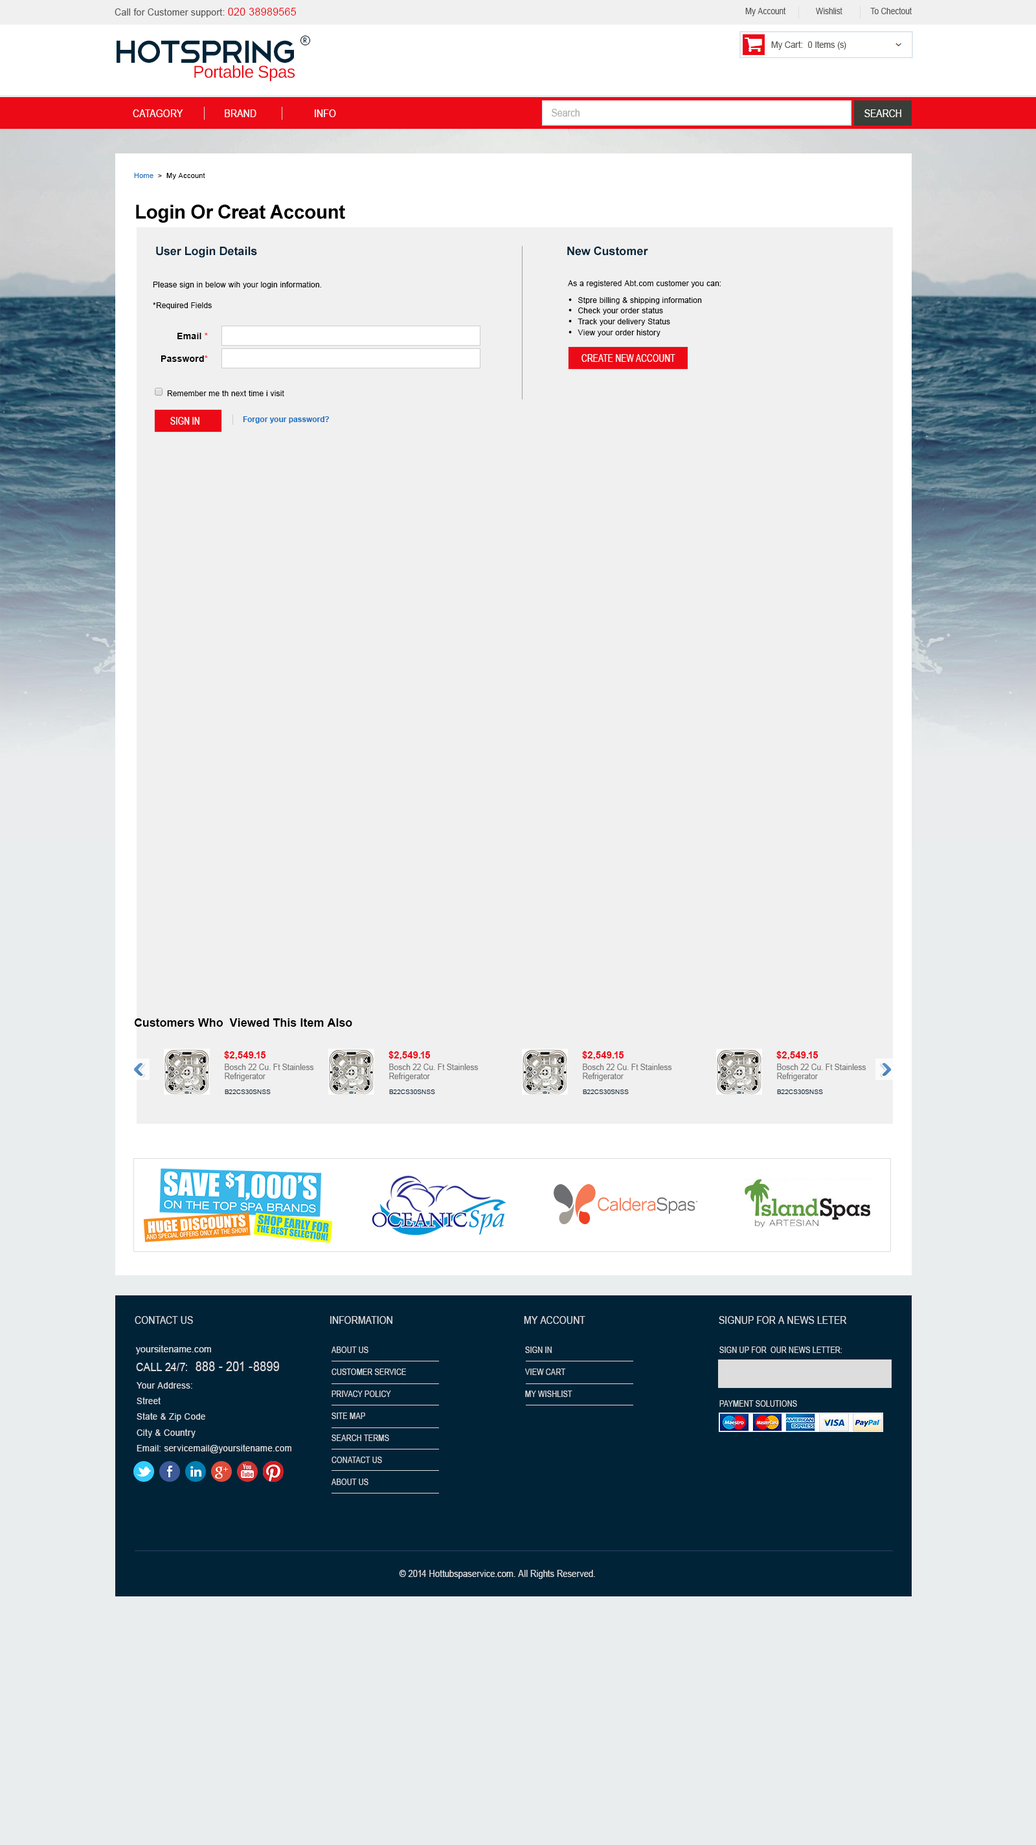
<style>
.page{position:relative;width:1036px;height:1845px;background:#f0f0f0}
.page>*{position:absolute;margin:0}
.t1{font:9.5px "ArialMT";letter-spacing:0.02em;color:#555555;scale:0.95 1}
.t2{font:10.9px "ArialMT";letter-spacing:0.02em;color:#ec0a17;scale:0.95 1}
.t3{font:8.9px "ArialMT";color:#555555;scale:0.87 1}
.t4{font:41.5px "Telegrafico";letter-spacing:-0.08em;color:#012338}
.t5{font:6.8px "HarmoniaSansStd-Regular";letter-spacing:0.03em;color:#012338}
.t6{font:8.8px "ArialMT";color:#555555;scale:0.95 1}
.t7{font:17.1px "LiberationSans";letter-spacing:-0.02em;color:#ec0a17}
.t8{font:10.4px "ArialMT";letter-spacing:0.01em;color:#ffffff;scale:0.87 1}
.t9{font:10.4px "ArialMT";color:#aeaba9;scale:0.87 1}
.t10{font:10.4px "ArialMT";color:#ffffff;scale:0.87 1}
.t11{font:7.1px "ArialMT";letter-spacing:0.02em;color:#000000}
.t12{font:7.1px "ArialMT";letter-spacing:0.02em;color:#1d70c0}
.t13{font:19.4px "Arial-BoldMT";letter-spacing:-0.02em;color:#000000}
.t14{font:11.7px "Arial-BoldMT";color:#012338}
.t15{font:7.8px "ArialMT";letter-spacing:0.02em;color:#000000}
.t16{font:9.7px "ArialMT";letter-spacing:0.02em;color:#000000}
.t17{font:9.1px "Arial-BoldMT";letter-spacing:0.02em;color:#000000}
.t18{font:9.1px "Arial-BoldMT";letter-spacing:0.02em;color:#f92834}
.t19{font:10.7px "ArialMT";color:#ffffff;text-transform:uppercase;scale:0.75 1}
.t20{font:7.8px "Arial-BoldMT"}
.t21{font:7.8px "Arial-BoldMT";color:#1d70c0}
.t22{font:11.7px "Arial-BoldMT";color:#000000}
.t23{font:9.7px "Arial-BoldMT";color:#ec0a17}
.t24{font:8.5px/9.1px "ArialMT";color:#777777;scale:0.91 1}
.t25{font:6.5px "ArialMT";color:#012338}
.t26{font:10.4px "ArialMT";letter-spacing:0.01em;color:#dddddd;scale:0.87 1}
.t27{font:9.9px "ArialMT";letter-spacing:0.03em;color:#dddddd;scale:0.9 1}
.t28{font:8.2px/22px "ArialMT";letter-spacing:0.01em;color:#dddddd;scale:0.87 1}
.t29{font:8.2px "ArialMT";letter-spacing:0.01em;color:#dddddd;scale:0.87 1}
.t30{font:13.4px "ArialMT";letter-spacing:0.01em;color:#dddddd;scale:0.87 1}
.t31{font:11.9px "ArialMT";letter-spacing:0.01em;color:#dddddd;scale:0.87 1}
.t32{font:9.1px/15.6px "ArialMT";letter-spacing:0.03em;color:#dddddd;scale:0.94 1}
.t33{font:9.7px "ArialMT";letter-spacing:0.01em;color:#dddddd;scale:0.87 1}
</style>
<div class="page">
<p class="t1" style="left:115px;top:8px;width:182px;height:9px">Call for Customer support: <span class="t2">020 38989565</span></p>
<p class="t3" style="left:745px;top:7px;width:167px;height:9px">My Account              Wishlist             To Chectout</p>
<p class="t4" style="left:117px;top:40px;width:177px;height:23px">HotSpring</p>
<p class="t5" style="left:303px;top:38px;width:4px;height:5px">R</p>
<p class="t6" style="left:771px;top:41px;width:75px;height:9px">My Cart:  0 Items (s)</p>
<p class="t7" style="left:194px;top:65px;width:101px;height:17px">Portable Spas</p>
<p class="t8" style="left:133px;top:109px;width:203px;height:8px">CATAGORY                BRAND                      INFO</p>
<p class="t9" style="left:552px;top:109px;width:27px;height:8px">Search</p>
<p class="t10" style="left:864px;top:109px;width:37px;height:8px">SEARCH</p>
<p class="t11" style="left:134px;top:173px;width:71px;height:6px"><span class="t12">Home </span> &gt;  My Account</p>
<p class="t13" style="left:136px;top:205px;width:209px;height:18px">Login Or Creat Account</p>
<p class="t14" style="left:156px;top:247px;width:101px;height:11px">User Login Details</p>
<p class="t14" style="left:567px;top:246px;width:81px;height:10px">New Customer</p>
<p class="t15" style="left:153px;top:282px;width:169px;height:7px">Please sign in below wih your login information.</p>
<p class="t15" style="left:568px;top:280px;width:153px;height:7px">As a registered Abt.com customer you can:</p>
<p class="t15" style="left:153px;top:302px;width:59px;height:7px">*Required Fields</p>
<p class="t15" style="left:568px;top:297px;width:134px;height:7px"><span class="t16">•  </span>Stpre billing &amp; shipping information</p>
<p class="t15" style="left:568px;top:308px;width:95px;height:7px"><span class="t16">•  </span>Check your order status</p>
<p class="t15" style="left:568px;top:319px;width:102px;height:7px"><span class="t16">•  </span>Track your delivery Status</p>
<p class="t15" style="left:568px;top:330px;width:92px;height:7px"><span class="t16">•  </span>View your order history</p>
<p class="t17" style="left:177px;top:333px;width:31px;height:6px">Email <span class="t18">*</span></p>
<p class="t17" style="left:161px;top:355px;width:47px;height:7px">Password<span class="t18">*</span></p>
<p class="t19" style="left:581px;top:354px;width:94px;height:8px">Create new account</p>
<p class="t20" style="left:582px;top:355px;width:93px;height:6px">CREATE NEW ACCOUNT</p>
<p class="t15" style="left:167px;top:390px;width:117px;height:6px">Remember me th next time i visit</p>
<p class="t19" style="left:170px;top:417px;width:29px;height:8px">Sign In</p>
<p class="t21" style="left:243px;top:416px;width:87px;height:7px">Forgor your password?</p>
<p class="t22" style="left:134px;top:1018px;width:218px;height:9px">Customers Who  Viewed This Item Also</p>
<p class="t23" style="left:224px;top:1051px;width:42px;height:9px">$2,549.15</p>
<p class="t23" style="left:388px;top:1051px;width:43px;height:9px">$2,549.15</p>
<p class="t23" style="left:582px;top:1051px;width:42px;height:9px">$2,549.15</p>
<p class="t23" style="left:776px;top:1051px;width:42px;height:9px">$2,549.15</p>
<p class="t24" style="left:225px;top:1064px;width:89px;height:17px;text-align:justify">Bosch 22 Cu. Ft Stainless<br>Refrigerator</p>
<p class="t24" style="left:389px;top:1064px;width:89px;height:17px;text-align:justify">Bosch 22 Cu. Ft Stainless<br>Refrigerator</p>
<p class="t24" style="left:583px;top:1064px;width:89px;height:17px;text-align:justify">Bosch 22 Cu. Ft Stainless<br>Refrigerator</p>
<p class="t24" style="left:777px;top:1064px;width:89px;height:17px;text-align:justify">Bosch 22 Cu. Ft Stainless<br>Refrigerator</p>
<p class="t25" style="left:225px;top:1090px;width:46px;height:4px">B22CS30SNSS</p>
<p class="t25" style="left:389px;top:1090px;width:46px;height:4px">B22CS30SNSS</p>
<p class="t25" style="left:583px;top:1090px;width:46px;height:4px">B22CS30SNSS</p>
<p class="t25" style="left:777px;top:1090px;width:46px;height:4px">B22CS30SNSS</p>
<p class="t26" style="left:135px;top:1316px;width:58px;height:8px">CONTACT US</p>
<p class="t26" style="left:330px;top:1316px;width:62px;height:8px">INFORMATION</p>
<p class="t26" style="left:524px;top:1316px;width:61px;height:8px">MY ACCOUNT</p>
<p class="t26" style="left:719px;top:1316px;width:128px;height:8px">SIGNUP FOR A NEWS LETER</p>
<p class="t27" style="left:135px;top:1345px;width:76px;height:10px">yoursitename.com</p>
<p class="t28" style="left:332px;top:1347px;width:74px;height:138px;text-align:justify">ABOUT US<br>CUSTOMER SERVICE<br>PRIVACY POLICY <br>SITE MAP<br>SEARCH TERMS<br>CONATACT US<br>ABOUT US</p>
<p class="t28" style="left:525px;top:1347px;width:47px;height:50px;text-align:justify">SIGN IN<br>VIEW CART<br>MY WISHLIST</p>
<p class="t29" style="left:719px;top:1347px;width:123px;height:6px">SIGN UP FOR  OUR NEWS LETTER:</p>
<p class="t30" style="left:136px;top:1362px;width:143px;height:9px"><span class="t31">CALL 24/7:  </span>888 - 201 -8899</p>
<p class="t32" style="left:137px;top:1382px;width:154px;height:72px;text-align:justify">Your Address:<br>Street<br>State &amp; Zip Code<br>City &amp; Country <br>Email: servicemail@yoursitename.com</p>
<p class="t29" style="left:719px;top:1401px;width:78px;height:6px">PAYMENT SOLUTIONS</p>
<p class="t33" style="left:399px;top:1570px;width:196px;height:9px">© 2014 Hottubspaservice.com. All Rights Reserved.</p>
</div>
